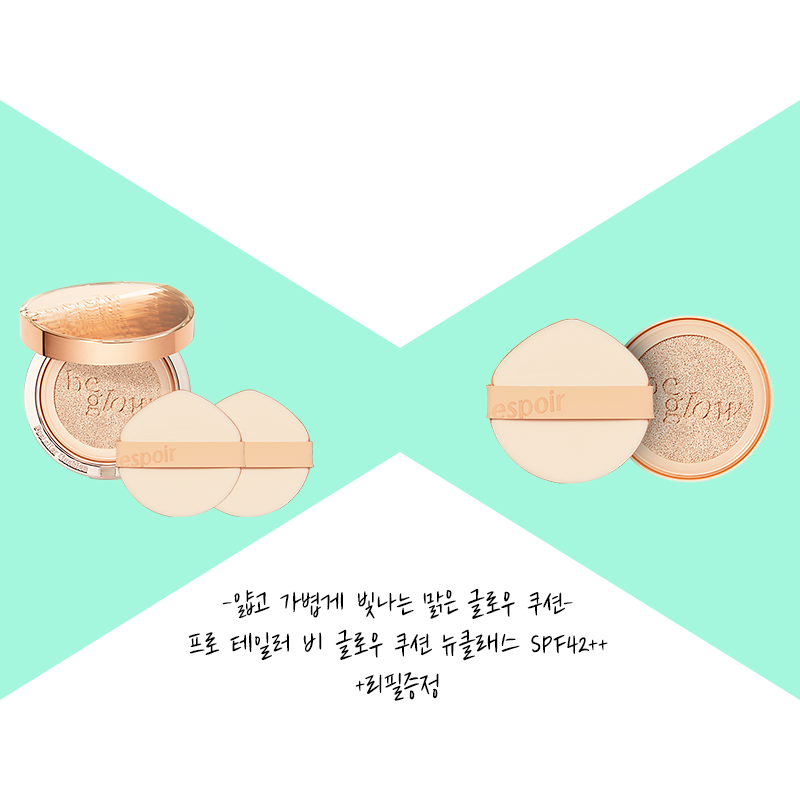
<style>
.page{position:relative;width:800px;height:800px;background:#ffffff}
.page>*{position:absolute;margin:0}
.t1{font:34px "Cafe24Shiningstar";color:#000000}
</style>
<div class="page">
<p class="t1" style="left:188px;top:588px;width:420px;height:113px;text-align:center">-얇고 가볍게 빛나는 맑은 글로우 쿠션-<br>프로 테일러 비 글로우 쿠션 뉴클래스 SPF42++<br>+리필증정</p>
</div>
